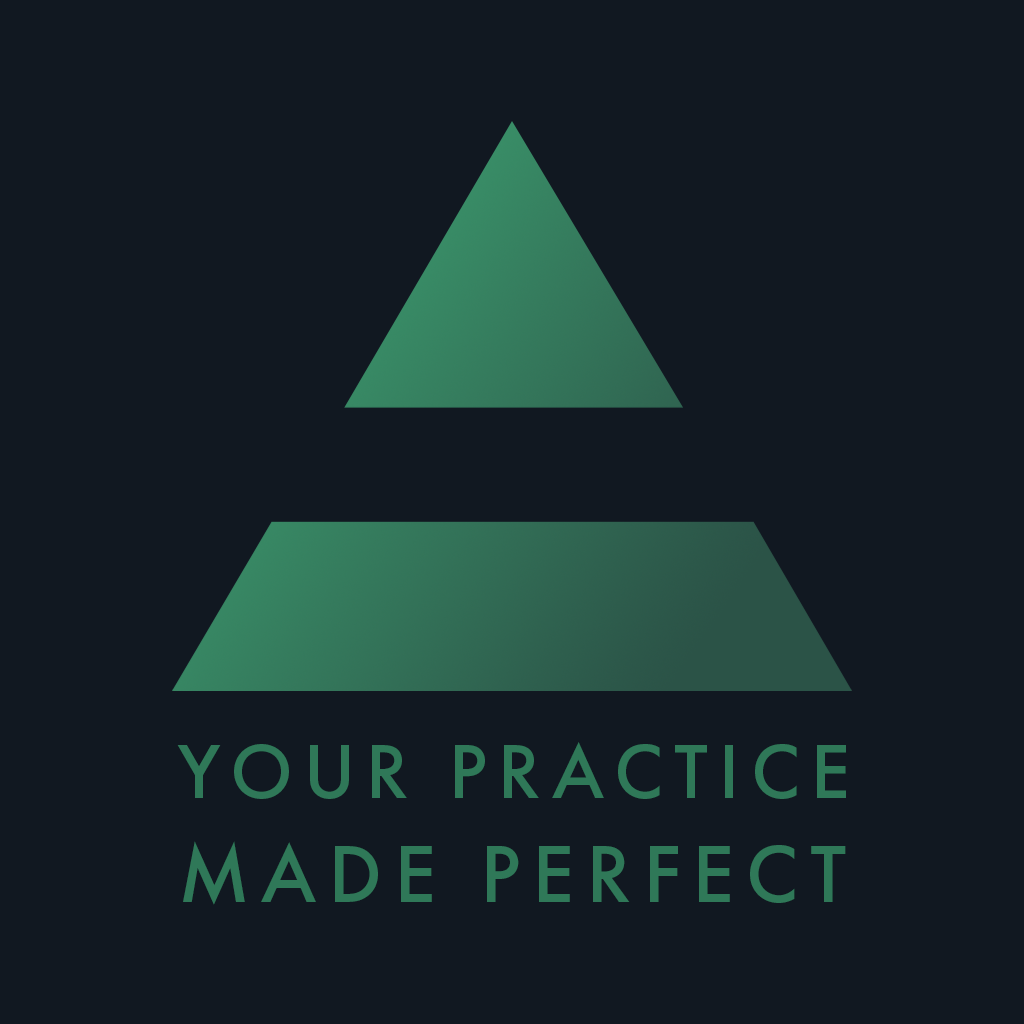
<style>
.page{position:relative;width:1024px;height:1024px;background:#111821}
.page>*{position:absolute;margin:0}
.t1{font:79.2px "FuturaPT-Medium";letter-spacing:0.14em;color:#2f7858}
.t2{font:84.2px "FuturaPT-Medium";letter-spacing:0.14em;color:#2f7858}
</style>
<div class="page">
<p class="t1" style="left:177px;top:742px;width:669px;height:57px">YOUR PRACTICE</p>
<p class="t2" style="left:183px;top:841px;width:663px;height:64px">MADE PERFECT</p>
</div>
